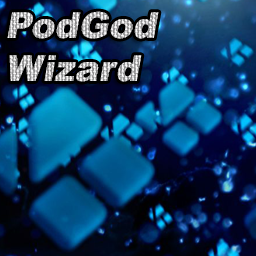
<style>
.page{position:relative;width:256px;height:256px}
.page>*{position:absolute;margin:0}
.t1{font:36px "Arial-Black";font-style:italic}
</style>
<div class="page">
<p class="t1" style="left:7px;top:11px;width:152px;height:71px">PodGod<br>Wizard</p>
</div>
